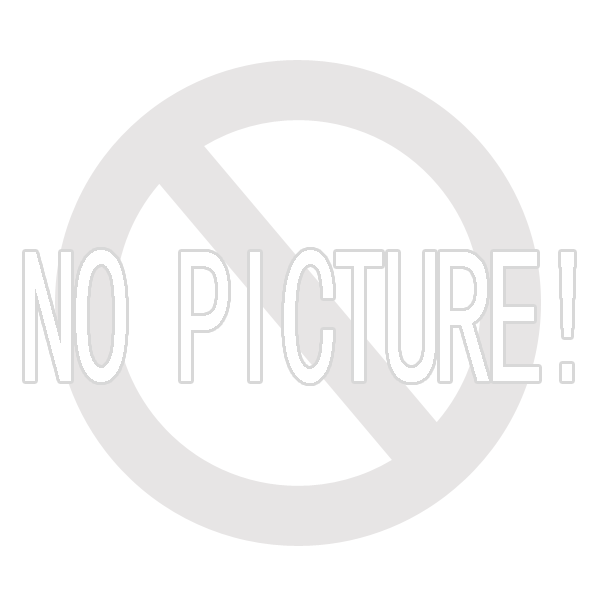
<style>
.page{position:relative;width:600px;height:600px;background:#ffffff}
.page>*{position:absolute;margin:0}
.t1{font:193.5px "SimHei";letter-spacing:-0.05em;color:#ffffff;scale:0.6 1}
</style>
<div class="page">
<p class="t1" style="left:25px;top:250px;width:549px;height:133px">NO PICTURE!</p>
</div>
